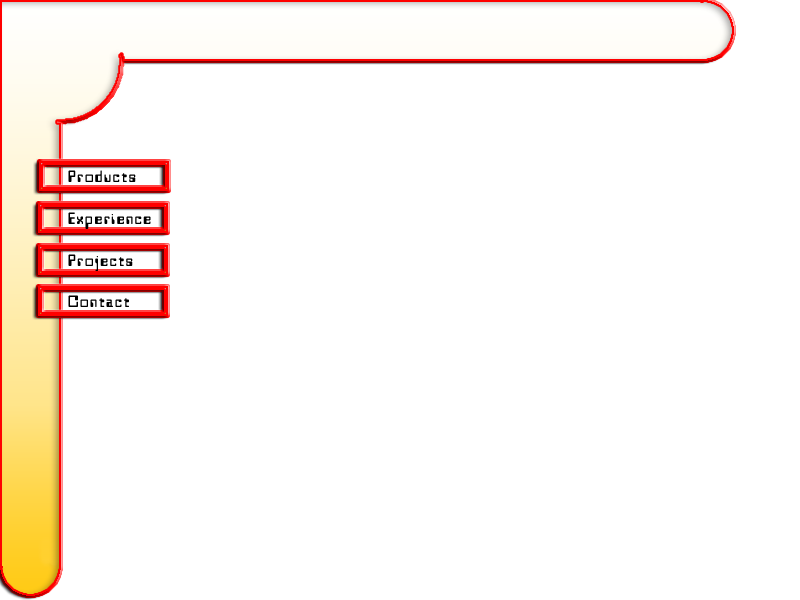
<style>
.page{position:relative;width:800px;height:600px;background:#ffffff}
.page>*{position:absolute;margin:0}
.t1{font:18px "Westminster";letter-spacing:0.1em;color:#000000}
</style>
<div class="page">
<p class="t1" style="left:68px;top:170px;width:68px;height:12px">Products</p>
<p class="t1" style="left:68px;top:212px;width:83px;height:17px">Experience</p>
<p class="t1" style="left:68px;top:254px;width:65px;height:17px">Projects</p>
<p class="t1" style="left:68px;top:295px;width:61px;height:12px">Contact</p>
</div>
